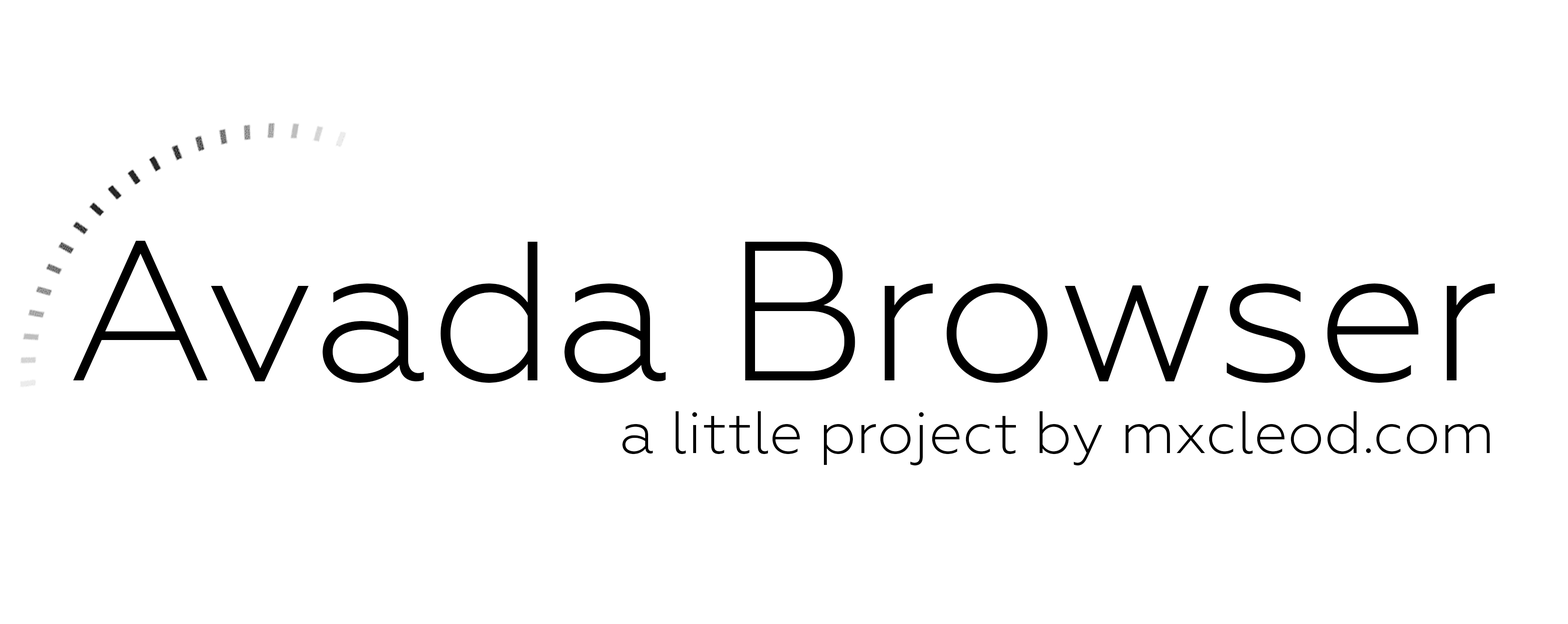
<style>
.page{position:relative;width:1568px;height:624px;background:#ffffff}
.page>*{position:absolute;margin:0}
.t1{font:198px "Geometria-Light";color:#000000}
.t2{font:59.4px "Geometria-Light";color:#000000}
</style>
<div class="page">
<p class="t1" style="left:73px;top:241px;width:1422px;height:142px">Avada Browser</p>
<p class="t2" style="left:622px;top:411px;width:868px;height:55px">a little project by mxcleod.com</p>
</div>
